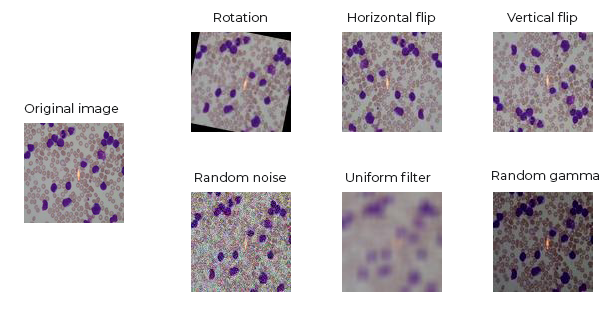
<style>
.page{position:relative;width:615px;height:310px;background:#ffffff}
.page>*{position:absolute;margin:0}
.t1{font:12.7px "Montserrat-Regular";color:#1d1e20}
</style>
<div class="page">
<p class="t1" style="left:214px;top:12px;width:53px;height:10px">Rotation</p>
<p class="t1" style="left:348px;top:12px;width:88px;height:13px">Horizontal flip</p>
<p class="t1" style="left:507px;top:12px;width:71px;height:13px">Vertical flip</p>
<p class="t1" style="left:24px;top:103px;width:95px;height:12px">Original image</p>
<p class="t1" style="left:195px;top:172px;width:91px;height:10px">Random noise</p>
<p class="t1" style="left:346px;top:172px;width:85px;height:10px">Uniform filter</p>
<p class="t1" style="left:492px;top:170px;width:107px;height:12px">Random gamma</p>
</div>
